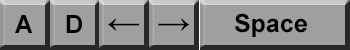
<style>
.page{position:relative;width:350px;height:50px;background:#9f9f9f}
.page>*{position:absolute;margin:0}
.t1{font:25px "Arial-BoldMT";color:#000000}
.t2{font:25.1px "Arial-BoldMT";color:#000000}
.t3{font:33.3px "Arial-BoldMT";color:#000000}
</style>
<div class="page">
<p class="t1" style="left:15px;top:15px;width:18px;height:18px">A</p>
<p class="t1" style="left:66px;top:15px;width:16px;height:18px">D</p>
<p class="t2" style="left:235px;top:13px;width:72px;height:24px">Space</p>
<p class="t3" style="left:108px;top:18px;width:31px;height:13px">←</p>
<p class="t3" style="left:158px;top:18px;width:31px;height:13px">→</p>
</div>
